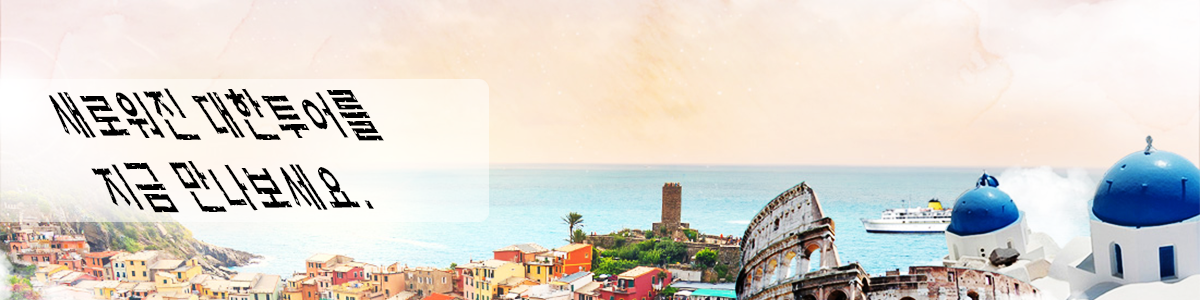
<style>
.page{position:relative;width:1200px;height:300px}
.page>*{position:absolute;margin:0}
.t1{font:72.4px "H2mkpB";letter-spacing:0.06em;color:#000000;scale:0.44 1}
</style>
<div class="page">
<p class="t1" style="left:48px;top:88px;width:336px;height:125px">새로워진 대한투어를 <br>지금 만나보세요.</p>
</div>
